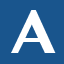
<style>
.page{position:relative;width:64px;height:64px;background:#19558d}
.page>*{position:absolute;margin:0}
.t1{font:60px "MyanmarMN-Bold";color:#ffffff}
</style>
<div class="page">
<p class="t1" style="left:11px;top:10px;width:45px;height:43px">A</p>
</div>
